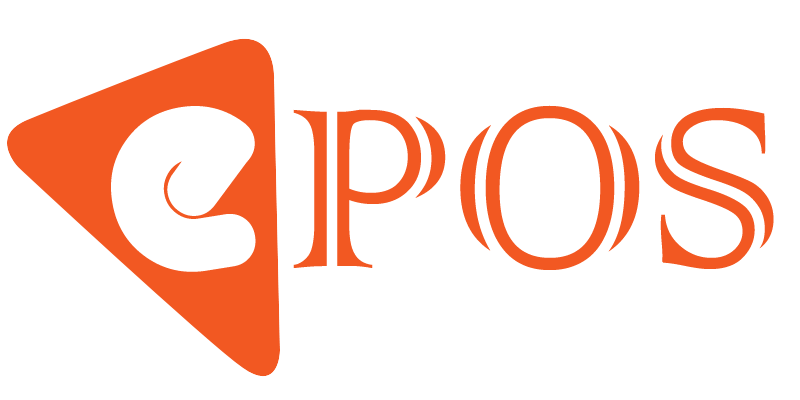
<style>
.page{position:relative;width:800px;height:400px;background:#ffffff}
.page>*{position:absolute;margin:0}
.t1{font:300px "UTM-Alba-Matter";color:#ffffff}
.t2{font:300px "ColonnaMT";color:#f25822}
</style>
<div class="page">
<p class="t1" style="left:111px;top:106px;width:145px;height:166px;rotate:-9deg">e</p>
<p class="t2" style="left:293px;top:105px;width:481px;height:165px">POS</p>
</div>
